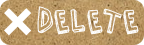
<style>
.page{position:relative;width:144px;height:45px}
.page>*{position:absolute;margin:0}
.t1{font:30px "CartoonRelief";color:#ffffff}
</style>
<div class="page">
<p class="t1" style="left:37px;top:6px;width:102px;height:29px">DELETE</p>
</div>
